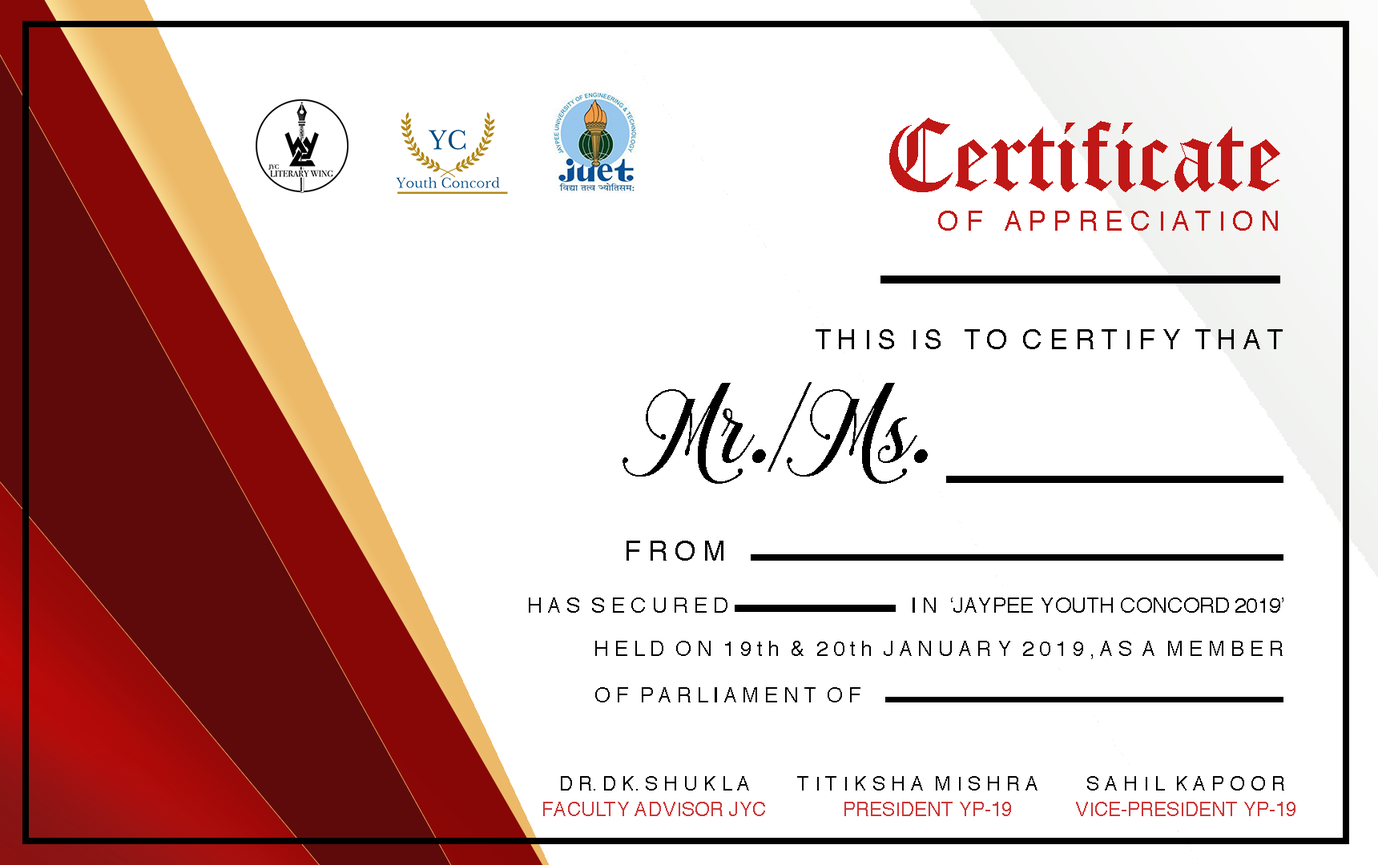
<style>
.page{position:relative;width:1378px;height:865px;background:#ffffff}
.page>*{position:absolute;margin:0}
.t1{font:112.2px "OldLondon";color:#c01816}
.t2{font:27.2px "Helvetica";color:#c01816}
.t3{font:27.2px "Helvetica";color:#000000}
.t4{font:112.2px "ChalisaOktavia";color:#000000}
.t5{font:21.2px "Helvetica";color:#000000}
.t6{font:20.8px "Helvetica";color:#000000}
.t7{font:19.2px "Helvetica";color:#000000}
.t8{font:9.6px "Helvetica";color:#cc3838}
</style>
<div class="page">
<p class="t1" style="left:889px;top:118px;width:391px;height:74px">Certificate</p>
<p class="t2" style="left:938px;top:211px;width:340px;height:20px">O F   A P P R E C I A T I O N</p>
<p class="t3" style="left:816px;top:329px;width:467px;height:20px">T H I S  I S   T O  C E R T I F Y  T H A T</p>
<p class="t4" style="left:623px;top:382px;width:305px;height:102px">Mr./Ms.</p>
<p class="t3" style="left:627px;top:541px;width:96px;height:20px">F R O M</p>
<p class="t5" style="left:529px;top:598px;width:755px;height:15px">H A S  S E C U R E D                                I N  ‘JAYPEE YOUTH CONCORD 2019’</p>
<p class="t6" style="left:595px;top:641px;width:688px;height:18px">H E L D  O N  1 9 t h  &amp;  2 0 t h  J A N U A R Y  2 0 1 9 , A S  A  M E M B E R</p>
<p class="t6" style="left:595px;top:687px;width:265px;height:16px">O F  P A R L I A M E N T  O F</p>
<p class="t7" style="left:561px;top:776px;width:188px;height:15px">D R. D K. S H U K L A</p>
<p class="t7" style="left:797px;top:776px;width:241px;height:15px">T I T I K S H A  M I S H R A</p>
<p class="t7" style="left:1087px;top:776px;width:197px;height:15px">S A H I L  K A P O O R</p>
<p class="t8" style="left:543px;top:802px;width:222px;height:14px">FACULTY ADVISOR JYC</p>
<p class="t8" style="left:844px;top:802px;width:167px;height:14px">PRESIDENT YP-19</p>
<p class="t8" style="left:1076px;top:802px;width:220px;height:14px">VICE-PRESIDENT YP-19</p>
</div>
